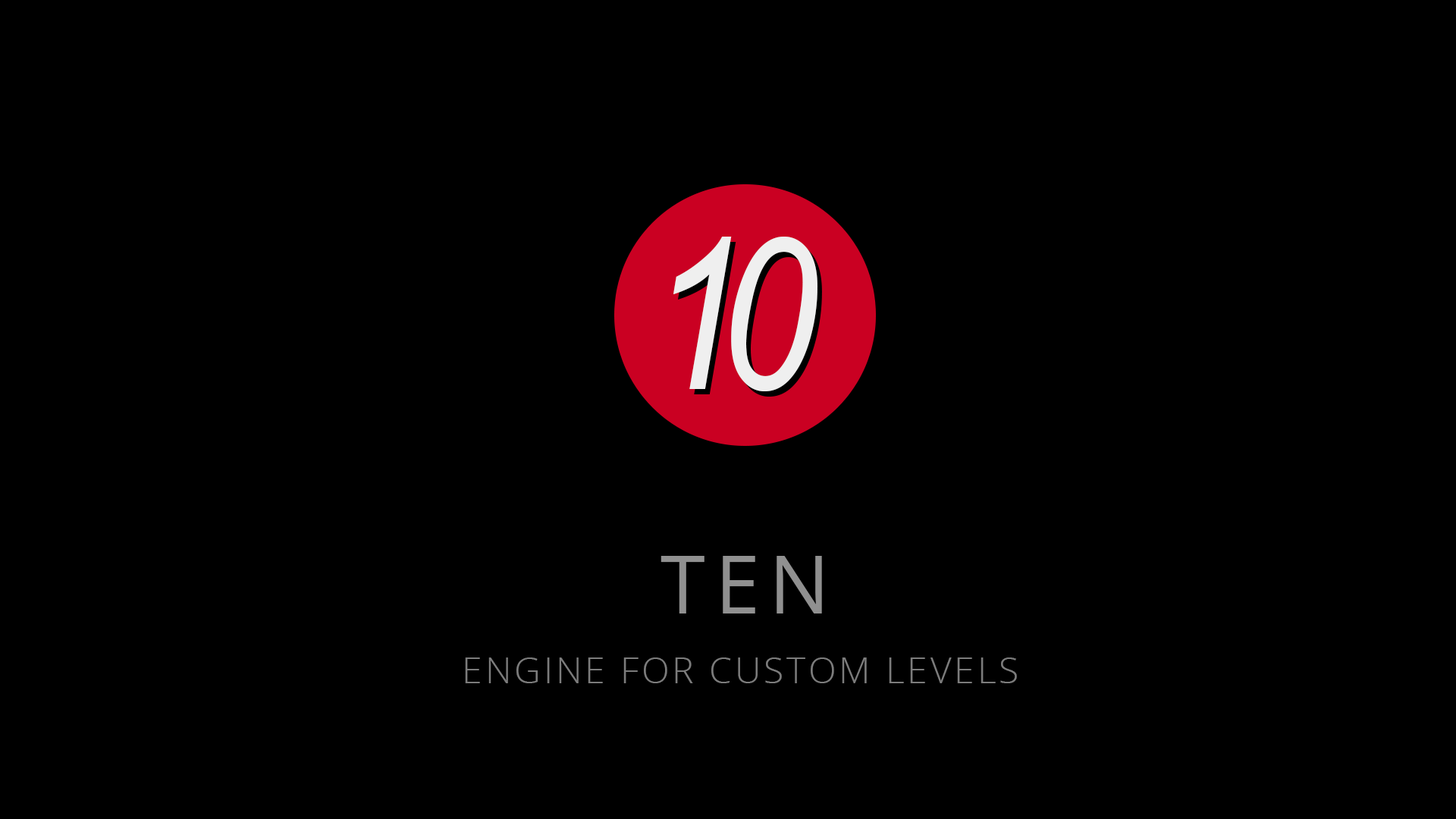
<style>
.page{position:relative;width:1456px;height:819px;background:#000000}
.page>*{position:absolute;margin:0}
.t1{font:212.5px "ArialNarrow-Italic";letter-spacing:-0.12em;color:#efefef}
.t2{font:80.4px "OpenSans-Regular";letter-spacing:0.12em;color:#909090}
.t3{font:36.4px "OpenSans-Light";letter-spacing:0.08em;color:#7c7c7c}
</style>
<div class="page">
<p class="t1" style="left:673px;top:237px;width:144px;height:154px">10</p>
<p class="t2" style="left:660px;top:556px;width:162px;height:57px">TEN</p>
<p class="t3" style="left:465px;top:657px;width:552px;height:26px">ENGINE FOR CUSTOM LEVELS</p>
</div>
